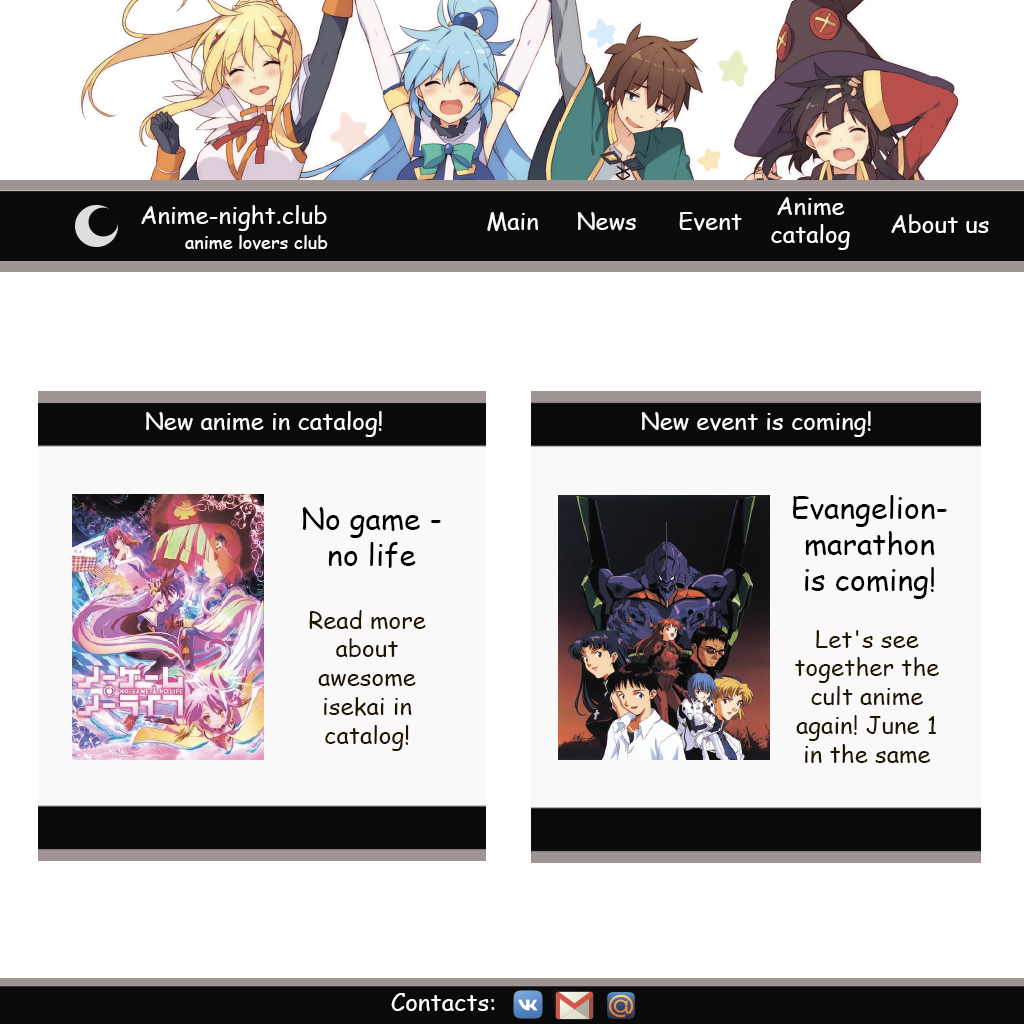
<style>
.page{position:relative;width:1024px;height:1024px;background:#ffffff}
.page>*{position:absolute;margin:0}
.t1{font:24px "ComicSansMS";color:#ffffff}
.t2{font:18px "ComicSansMS";color:#ffffff}
.t3{font:30px "ComicSansMS";color:#000000}
.t4{font:24px "ComicSansMS";color:#201600}
</style>
<div class="page">
<p class="t1" style="left:771px;top:197px;width:79px;height:53px;text-align:center">Anime<br>catalog</p>
<p class="t1" style="left:141px;top:205px;width:186px;height:26px">Anime-night.club</p>
<p class="t1" style="left:487px;top:212px;width:51px;height:19px">Main</p>
<p class="t1" style="left:577px;top:212px;width:59px;height:19px">News</p>
<p class="t1" style="left:679px;top:212px;width:63px;height:19px">Event</p>
<p class="t1" style="left:891px;top:214px;width:98px;height:19px">About us</p>
<p class="t2" style="left:185px;top:235px;width:143px;height:15px">anime lovers club</p>
<p class="t1" style="left:146px;top:411px;width:236px;height:26px">New anime in catalog!</p>
<p class="t1" style="left:641px;top:411px;width:230px;height:26px">New event is coming!</p>
<p class="t3" style="left:793px;top:495px;width:154px;height:104px;text-align:center">Evangelion-marathon is coming!</p>
<p class="t3" style="left:302px;top:507px;width:139px;height:61px;text-align:center">No game - <br>no life</p>
<p class="t4" style="left:309px;top:610px;width:117px;height:141px;text-align:center">Read more about awesome isekai in catalog!</p>
<p class="t4" style="left:795px;top:630px;width:144px;height:133px;text-align:center">Let's see together the cult anime again! June 1 in the same place!</p>
<p class="t1" style="left:391px;top:993px;width:104px;height:18px">Contacts:</p>
</div>
